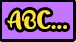
<style>
.page{position:relative;width:76px;height:42px;background:#c276fd}
.page>*{position:absolute;margin:0}
.t1{font:26.7px "MagicOwl-PersonalUse";color:#ffde43}
</style>
<div class="page">
<p class="t1" style="left:7px;top:10px;width:60px;height:20px">ABC...</p>
</div>
